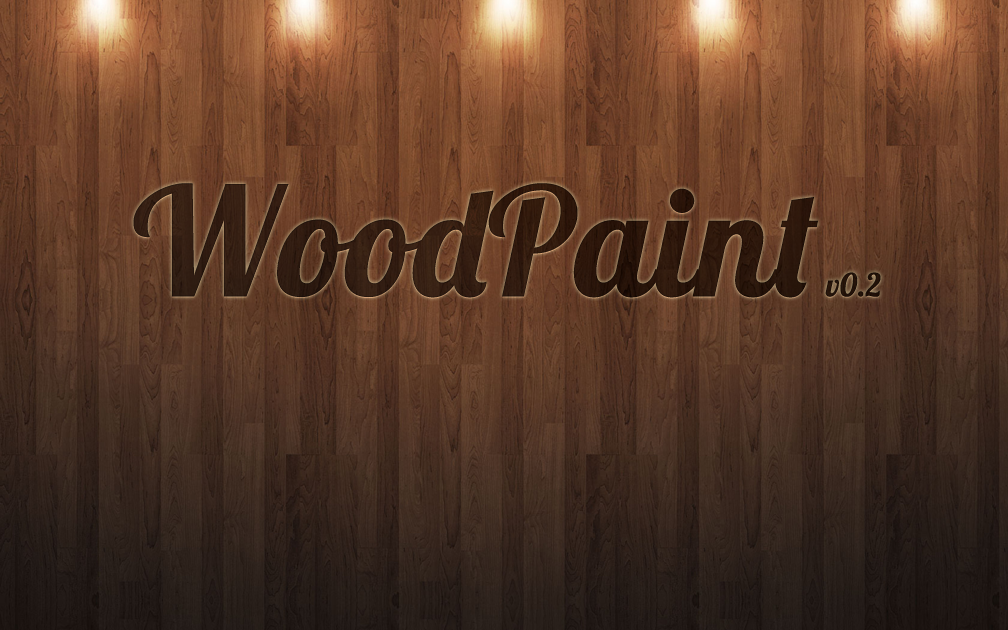
<style>
.page{position:relative;width:1008px;height:630px}
.page>*{position:absolute;margin:0}
.t1{font:150.8px "Lobster1.4";letter-spacing:0.01em;color:#2f1a0e}
.t2{font:31.7px "Lobster1.4";letter-spacing:0.01em;color:#2f1a0e}
</style>
<div class="page">
<p class="t1" style="left:133px;top:183px;width:748px;height:115px">WoodPaint <span class="t2">v0.2</span></p>
</div>
